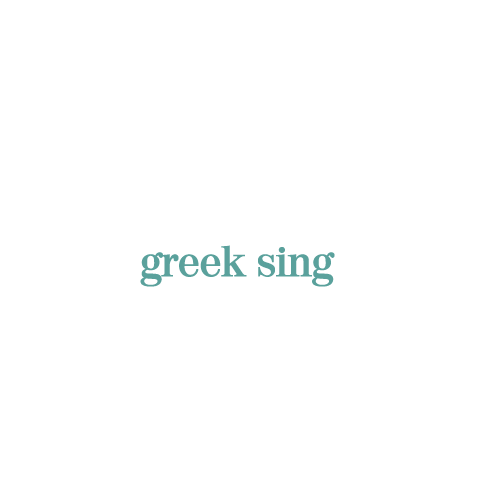
<style>
.page{position:relative;width:500px;height:500px;background:#ffffff}
.page>*{position:absolute;margin:0}
.t1{font:42px "Valencia-DemiBold";color:#5aa19c}
</style>
<div class="page">
<p class="t1" style="left:140px;top:245px;width:195px;height:42px">greek sing</p>
</div>
